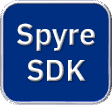
<style>
.page{position:relative;width:112px;height:105px;background:#002e80}
.page>*{position:absolute;margin:0}
.t1{font:30px "IBMPlexSans-SemiBold";color:#ffffff}
</style>
<div class="page">
<p class="t1" style="left:17px;top:23px;width:78px;height:59px;text-align:center">Spyre<br>SDK</p>
</div>
